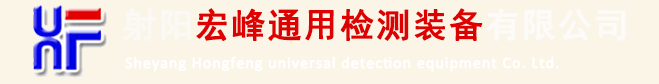
<style>
.page{position:relative;width:659px;height:84px;background:#fbf5e7}
.page>*{position:absolute;margin:0}
.t1{font:34px "SimHei";letter-spacing:0.04em;color:#dd0201;font-weight:bold}
.t2{font:34px "SimHei";letter-spacing:0.04em;color:#1f1f1e;font-weight:bold}
.t3{font:34px "SimHei";letter-spacing:0.04em;color:#faf9f6;font-weight:bold}
.t4{font:34px "SimHei";letter-spacing:0.04em;color:#fcfbfa;font-weight:bold}
.t5{font:16px "Calibri";letter-spacing:0.04em;color:#ffffff;font-weight:bold}
</style>
<div class="page">
<p class="t1" style="left:123px;top:8px;width:503px;height:33px"><span class="t2">  </span><span class="t3">射阳</span>宏峰通用检测装备<span class="t4">有限公司</span></p>
<p class="t5" style="left:125px;top:56px;width:434px;height:16px">Sheyang Hongfeng universal detection equipment Co. Ltd.</p>
</div>
